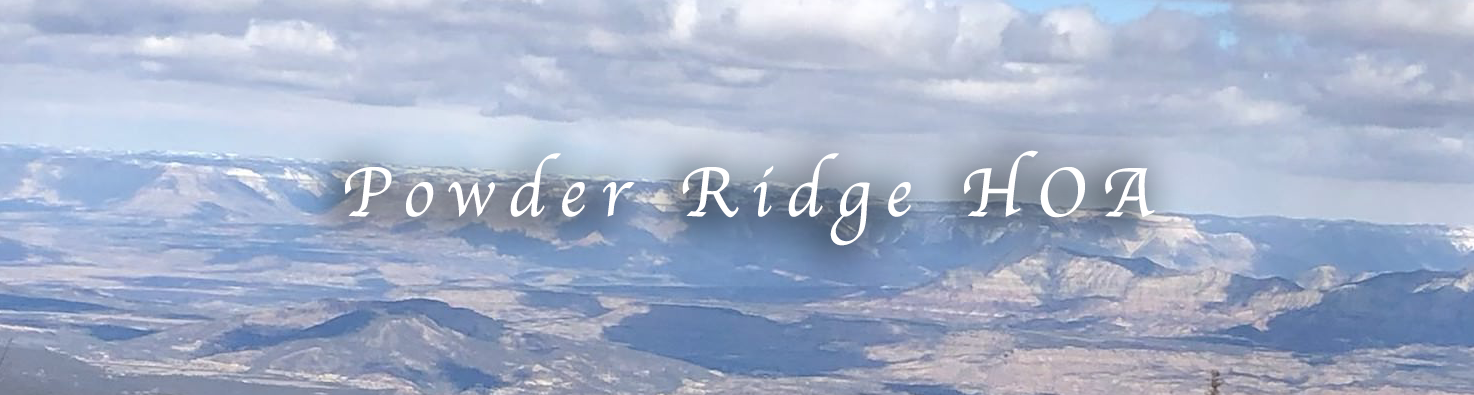
<style>
.page{position:relative;width:1474px;height:395px}
.page>*{position:absolute;margin:0}
.t1{font:72px "Apple-Chancery";letter-spacing:0.2em;color:#ffffff}
</style>
<div class="page">
<p class="t1" style="left:345px;top:150px;width:810px;height:96px">Powder Ridge HOA</p>
</div>
